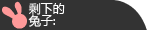
<style>
.page{position:relative;width:147px;height:30px;background:#333333}
.page>*{position:absolute;margin:0}
.t1{font:12px/12px "MicrosoftYaHei";color:#ffffff}
</style>
<div class="page">
<p class="t1" style="left:28px;top:3px;width:37px;height:24px">剩下的<br>兔子:</p>
</div>
